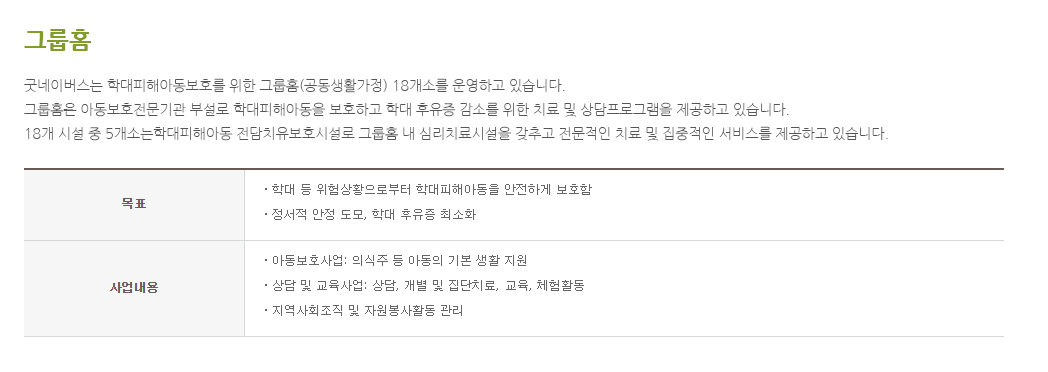
<style>
.page{position:relative;width:1048px;height:372px;background:#ffffff}
.page>*{position:absolute;margin:0}
.t1{font:24px "NanumGothicExtraBold";color:#829c2c}
.t2{font:14px/24px "NanumGothicLight";color:#555555}
</style>
<div class="page">
<p class="t1" style="left:24px;top:29px;width:67px;height:22px">그룹홈</p>
<p class="t2" style="left:24px;top:78px;width:864px;height:63px">굿네이버스는 학대피해아동보호를 위한 그룹홈(공동생활가정) 18개소를 운영하고 있습니다.<br>그룹홈은 아동보호전문기관 부설로 학대피해아동을 보호하고 학대 후유증 감소를 위한 치료 및 상담프로그램을 제공하고 있습니다. <br>18개 시설 중 5개소는학대피해아동 전담치유보호시설로 그룹홈 내 심리치료시설을 갖추고 전문적인 치료 및 집중적인 서비스를 제공하고 있습니다.</p>
</div>
